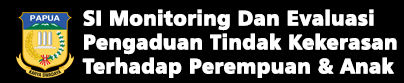
<style>
.page{position:relative;width:404px;height:83px;background:#000000}
.page>*{position:absolute;margin:0}
.t1{font:20.6px "Humanist777BT-BlackB";color:#ffffff;font-weight:bold}
</style>
<div class="page">
<p class="t1" style="left:82px;top:9px;width:315px;height:69px">SI Monitoring Dan Evaluasi Pengaduan Tindak Kekerasan Terhadap Perempuan &amp; Anak</p>
</div>
